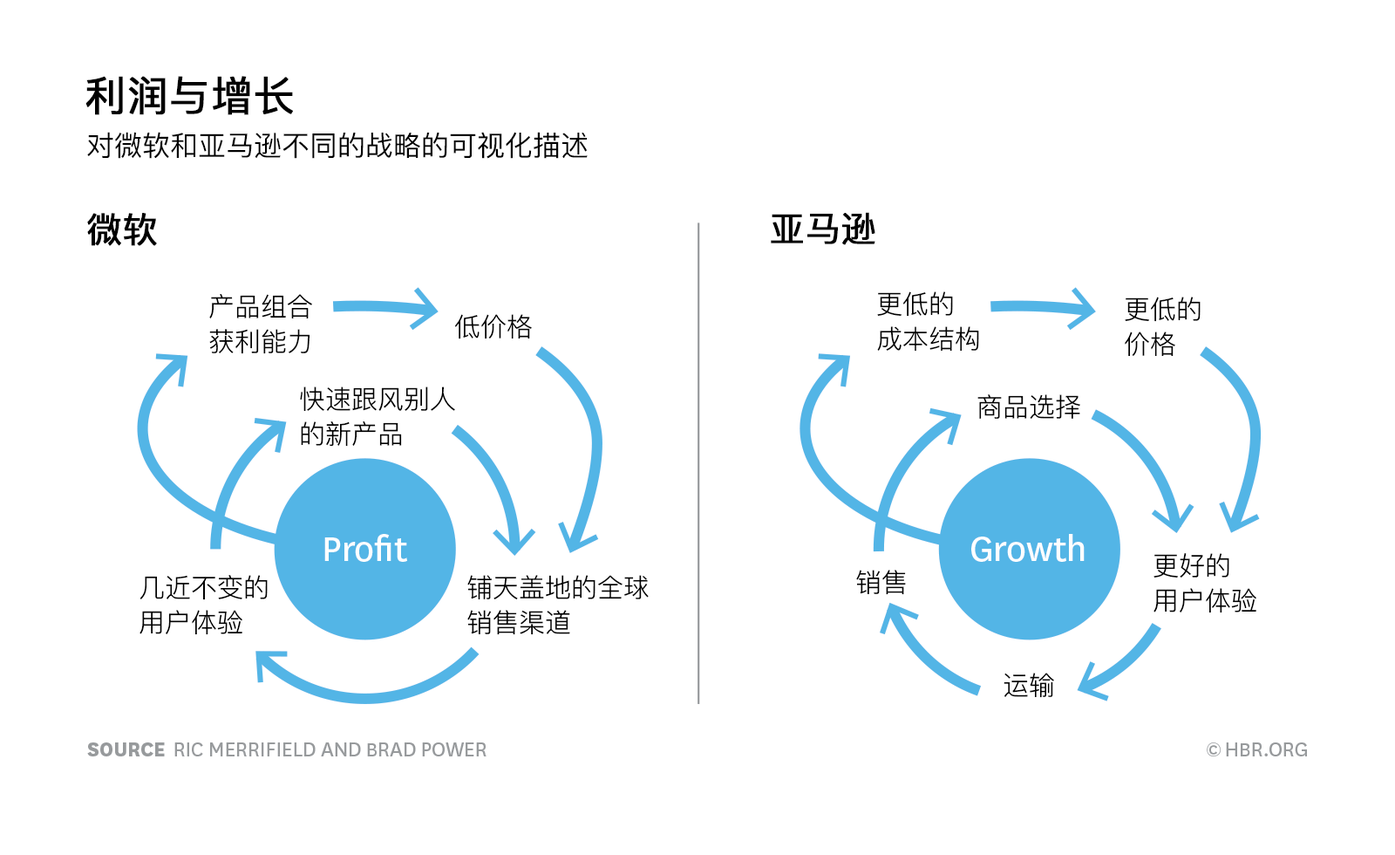
<style>
.page{position:relative;width:1395px;height:855px;background:#ffffff}
.page>*{position:absolute;margin:0}
.t1{font:41px "PingFangSC-Regular";color:#000000;font-weight:bold}
.t2{font:27.9px "PingFangSC-Regular";color:#000000}
.t3{font:34.9px "PingFangSC-Regular";color:#000000;font-weight:bold}
.t4{font:26.2px/34.9px "PingFangSC-Light";color:#000000}
.t5{font:26.2px "PingFangSC-Light";color:#000000}
</style>
<div class="page">
<p class="t1" style="left:85px;top:76px;width:208px;height:39px">利润与增长</p>
<p class="t2" style="left:87px;top:132px;width:501px;height:27px">对微软和亚马逊不同的战略的可视化描述</p>
<p class="t3" style="left:87px;top:213px;width:70px;height:33px">微软</p>
<p class="t3" style="left:771px;top:212px;width:105px;height:33px">亚马逊</p>
<p class="t4" style="left:209px;top:294px;width:103px;height:60px">产品组合<br>获利能力</p>
<p class="t4" style="left:877px;top:291px;width:102px;height:60px">更低的<br>成本结构</p>
<p class="t4" style="left:1125px;top:296px;width:76px;height:60px">更低的<br>价格</p>
<p class="t5" style="left:455px;top:314px;width:77px;height:25px">低价格</p>
<p class="t4" style="left:300px;top:386px;width:155px;height:60px">快速跟风别人<br>的新产品</p>
<p class="t5" style="left:978px;top:394px;width:102px;height:25px">商品选择</p>
<p class="t4" style="left:1154px;top:553px;width:103px;height:60px">更好的<br>用户体验</p>
<p class="t5" style="left:856px;top:569px;width:50px;height:26px">销售</p>
<p class="t4" style="left:140px;top:575px;width:128px;height:60px">几近不变的<br>用户体验</p>
<p class="t4" style="left:467px;top:575px;width:182px;height:60px">铺天盖地的全球<br>销售渠道</p>
<p class="t5" style="left:1004px;top:672px;width:50px;height:26px">运输</p>
</div>
